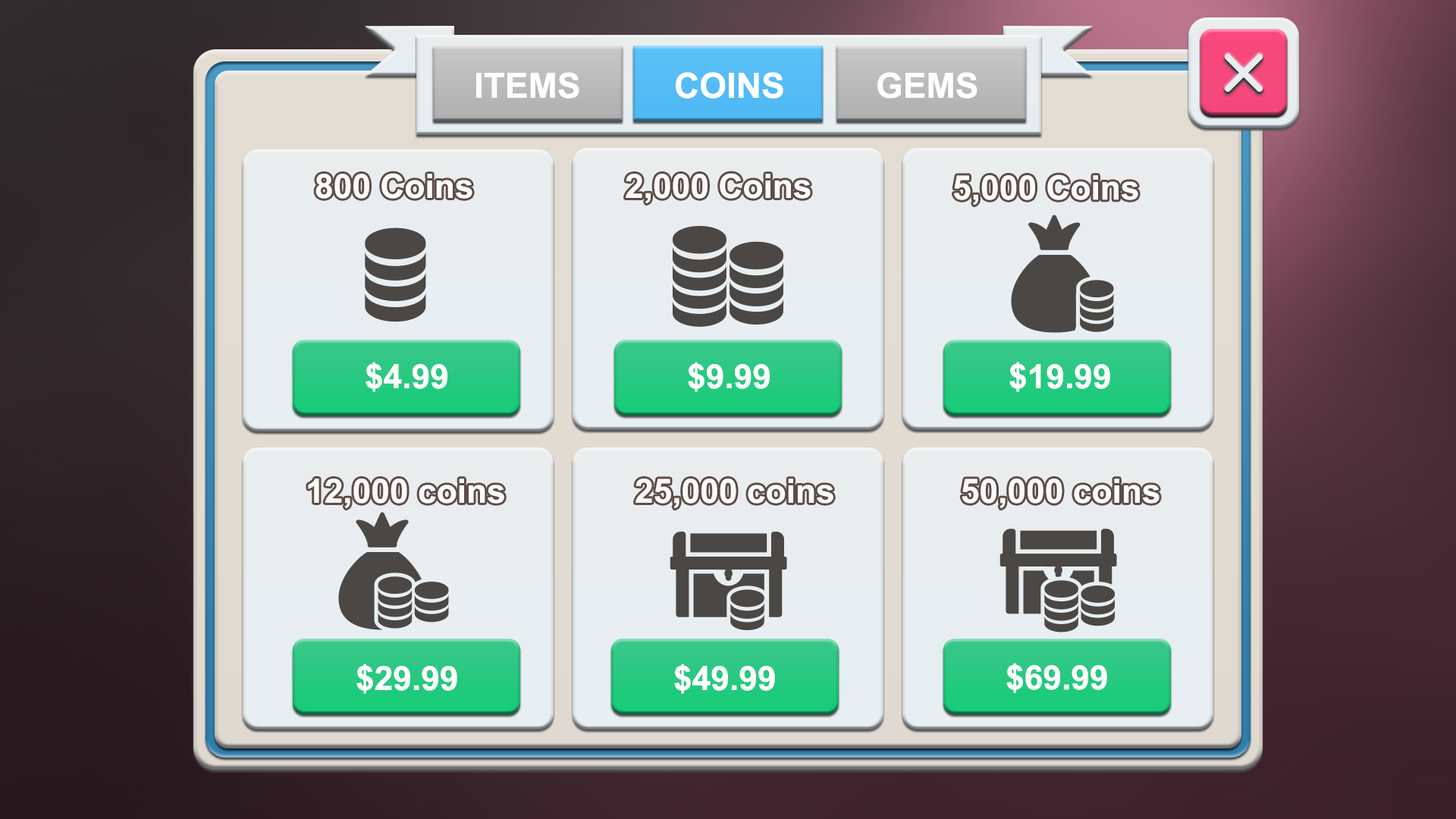
<style>
.page{position:relative;width:1456px;height:819px}
.page>*{position:absolute;margin:0}
.t1{font:34.9px "Arial-BoldMT";color:#ffffff}
.t2{font:33.6px "Arial-BoldMT";color:#ffffff}
</style>
<div class="page">
<p class="t1" style="left:476px;top:72px;width:103px;height:27px">ITEMS</p>
<p class="t1" style="left:676px;top:72px;width:107px;height:27px">COINS</p>
<p class="t1" style="left:877px;top:72px;width:100px;height:27px">GEMS</p>
<p class="t2" style="left:315px;top:173px;width:157px;height:26px">800 Coins</p>
<p class="t2" style="left:626px;top:173px;width:185px;height:31px">2,000 Coins</p>
<p class="t2" style="left:954px;top:174px;width:184px;height:32px">5,000 Coins</p>
<p class="t2" style="left:366px;top:362px;width:81px;height:30px">$4.99</p>
<p class="t2" style="left:688px;top:362px;width:82px;height:30px">$9.99</p>
<p class="t2" style="left:1009px;top:362px;width:101px;height:30px">$19.99</p>
<p class="t2" style="left:308px;top:479px;width:196px;height:30px">12,000 coins</p>
<p class="t2" style="left:635px;top:479px;width:198px;height:30px">25,000 coins</p>
<p class="t2" style="left:962px;top:479px;width:197px;height:30px">50,000 coins</p>
<p class="t2" style="left:356px;top:664px;width:101px;height:30px">$29.99</p>
<p class="t2" style="left:674px;top:664px;width:101px;height:30px">$49.99</p>
<p class="t2" style="left:1006px;top:663px;width:101px;height:30px">$69.99</p>
</div>
